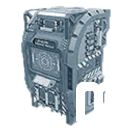
<style>
.page{position:relative;width:128px;height:128px;background:#ffffff}
.page>*{position:absolute;margin:0}
.t1{font:48px "Scorpion";color:#ffffff}
</style>
<div class="page">
<p class="t1" style="left:76px;top:82px;width:45px;height:39px">M</p>
</div>
